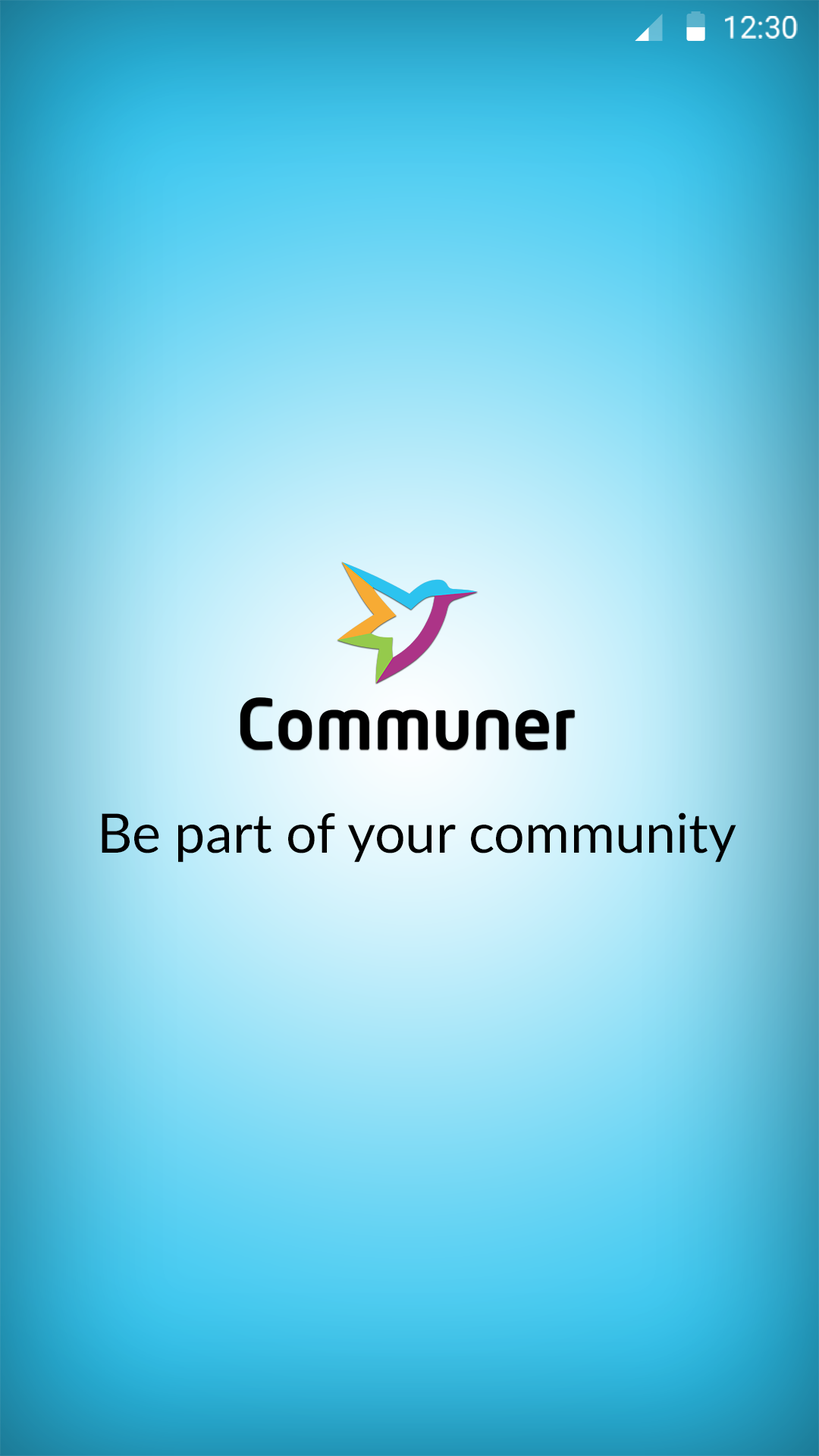
<style>
.page{position:relative;width:819px;height:1456px}
.page>*{position:absolute;margin:0}
.t1{font:30.3px "Roboto-Regular";color:#ffffff}
.t2{font:54.6px "Lato-Regular";color:#000000}
</style>
<div class="page">
<p class="t1" style="left:725px;top:16px;width:73px;height:23px">12:30</p>
<p class="t2" style="left:102px;top:813px;width:634px;height:50px">Be part of your community</p>
</div>
